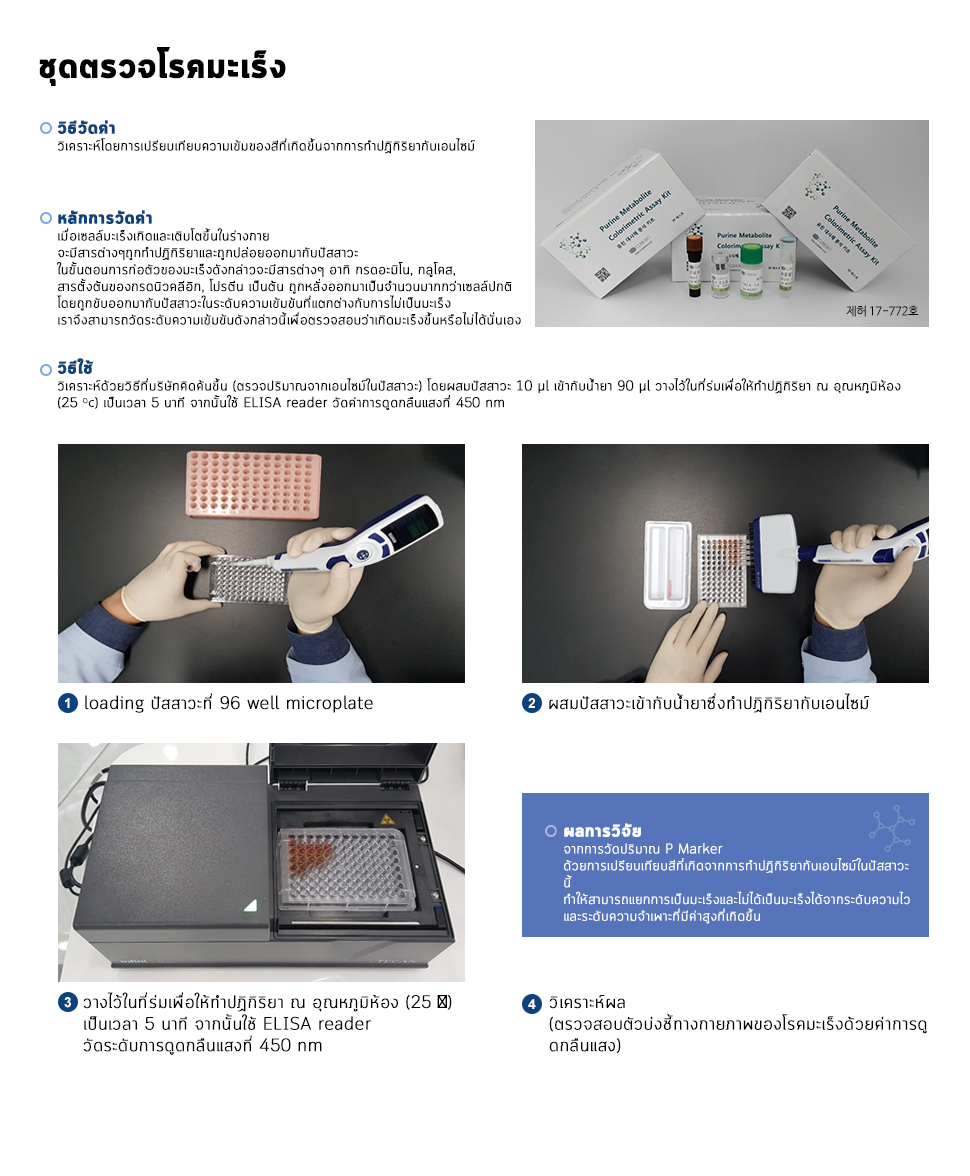
<style>
.page{position:relative;width:970px;height:1176px;background:#ffffff}
.page>*{position:absolute;margin:0}
.t1{font:36px "Cloud-Bold";color:#000000;font-weight:bold}
.t2{font:14px "Cloud-Light";color:#000000;font-weight:bold}
.t3{font:18px "Cloud-Bold";color:#0e427c;font-weight:bold}
.t4{font:10px "Cloud-Light";color:#000000;font-weight:bold}
.t5{font:14px "MyriadPro-Regular";color:#000000}
.t6{font:18px "Cloud-Light";color:#000000;font-weight:bold}
.t7{font:14px "Cloud-Light";color:#fffefe;font-weight:bold}
.t8{font:18px "Cloud-Bold";color:#fffefe;font-weight:bold}
.t9{font:18px "MyriadPro-Regular";color:#000000;font-weight:bold}
</style>
<div class="page">
<p class="t1" style="left:39px;top:47px;width:247px;height:39px">ชุดตรวจโรคมะเร็ง</p>
<p class="t2" style="left:57px;top:120px;width:418px;height:34px"><span class="t3">วิธีวัดค่า<br></span>วิเคราะห์โดยการเปรียบเทียบความเข้มของสีที่เกิดขึ้นจากการทำปฏิกิริยากับเอนไซม์</p>
<p class="t2" style="left:57px;top:210px;width:464px;height:115px"><span class="t3">หลักการวัดค่า<br></span>เมื่อเซลล์มะเร็งเกิดและเติบโตขึ้นในร่างกาย จะมีสารต่างๆถูกทำปฏิกิริยาและถูกปล่อยออกมากับปัสสาวะ ในขั้นตอนการก่อตัวของมะเร็งดังกล่าวจะมีสารต่างๆ อาทิ กรดอะมิโน, กลูโคส, สารตั้งต้นของกรดนิวคลีอิก, โปรตีน เป็นต้น ถูกหลั่งออกมาเป็นจำนวนมากกว่าเซลล์ปกติ โดยถูกขับออกมากับปัสสาวะในระดับความเข้มข้นที่แตกต่างกับการไม่เป็นมะเร็ง เราจึงสามารถวัดระดับความเข้มข้นดังกล่าวนี้เพื่อตรวจสอบว่าเกิดมะเร็งขึ้นหรือไม่ได้นั่นเอง</p>
<p class="t2" style="left:57px;top:358px;width:844px;height:52px"><span class="t3">วิธีใช้<br></span>วิเคราะห์ด้วยวิธีที่บริษัทคิดค้นขึ้น (ตรวจปริมาณจากเอนไซม์ในปัสสาวะ) โดยผสมปัสสาวะ 10 μl เข้ากับน้ำยา 90 μl วางไว้ในที่ร่มเพื่อให้ทำปฏิกิริยา ณ อุณหภูมิห้อง<br>(25 <span class="t4">o</span><span class="t5">c</span>) เป็นเวลา 5 นาที จากนั้นใช้ ELISA reader วัดค่าการดูดกลืนแสงที่ 450 nm</p>
<p class="t6" style="left:85px;top:693px;width:288px;height:20px">loading ปัสสาวะที่ 96 well microplate</p>
<p class="t6" style="left:549px;top:693px;width:321px;height:20px">ผสมปัสสาวะเข้ากับน้ำยาซึ่งทำปฏิกิริยากับเอนไซม์</p>
<p class="t7" style="left:564px;top:823px;width:346px;height:101px"><span class="t8">ผลการวิจัย<br></span>จากการวัดปริมาณ P Marker ด้วยการเปรียบเทียบสีที่เกิดจากการทำปฏิกิริยากับเอนไซม์ในปัสสาวะนี้ ทำให้สามารถแยกการเป็นมะเร็งและไม่ได้เป็นมะเร็งได้จากระดับความไวและระดับความจำเพาะที่มีค่าสูงที่เกิดขึ้น</p>
<p class="t6" style="left:83px;top:992px;width:369px;height:63px">วางไว้ในที่ร่มเพื่อให้ทำปฏิกิริยา ณ อุณหภูมิห้อง (25 <span class="t9">℃</span>) เป็นเวลา 5 นาที จากนั้นใช้ ELISA reader วัดระดับการดูดกลืนแสงที่ 450 nm</p>
<p class="t6" style="left:549px;top:995px;width:378px;height:58px">วิเคราะห์ผล (ตรวจสอบตัวบ่งชี้ทางกายภาพของโรคมะเร็งด้วยค่าการดูดกลืนแสง)</p>
</div>
